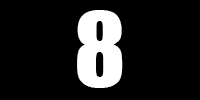
<style>
.page{position:relative;width:200px;height:100px;background:#000000}
.page>*{position:absolute;margin:0}
.t1{font:96px "Impact";color:#ffffff}
</style>
<div class="page">
<p class="t1" style="left:77px;top:10px;width:46px;height:78px">8</p>
</div>
